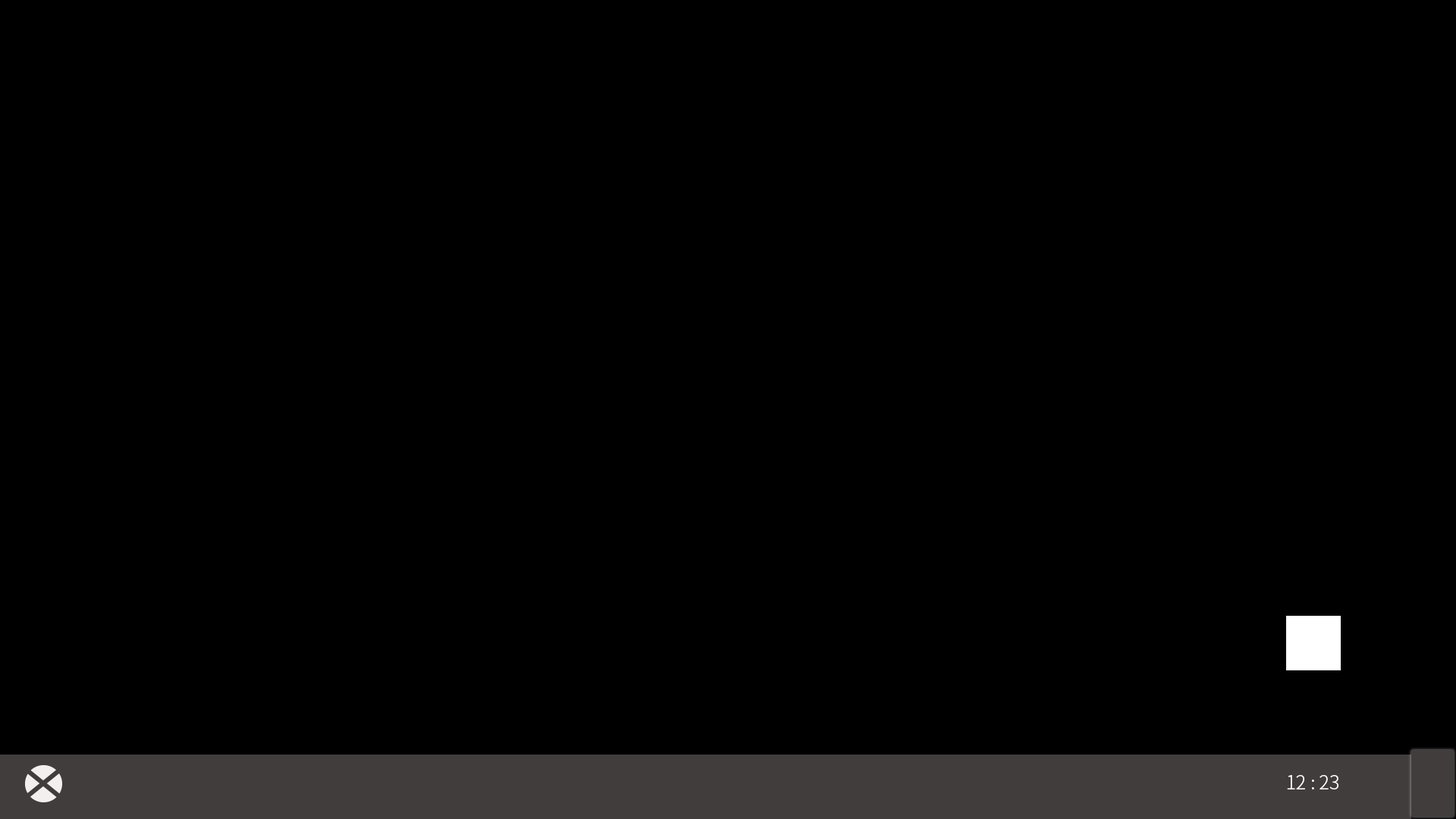
<style>
.page{position:relative;width:1456px;height:819px;background:#000000}
.page>*{position:absolute;margin:0}
.t1{font:19px "NotoSansJP-Light";color:#ffffff}
</style>
<div class="page">
<p class="t1" style="left:1287px;top:775px;width:51px;height:14px">12 : 23</p>
</div>
